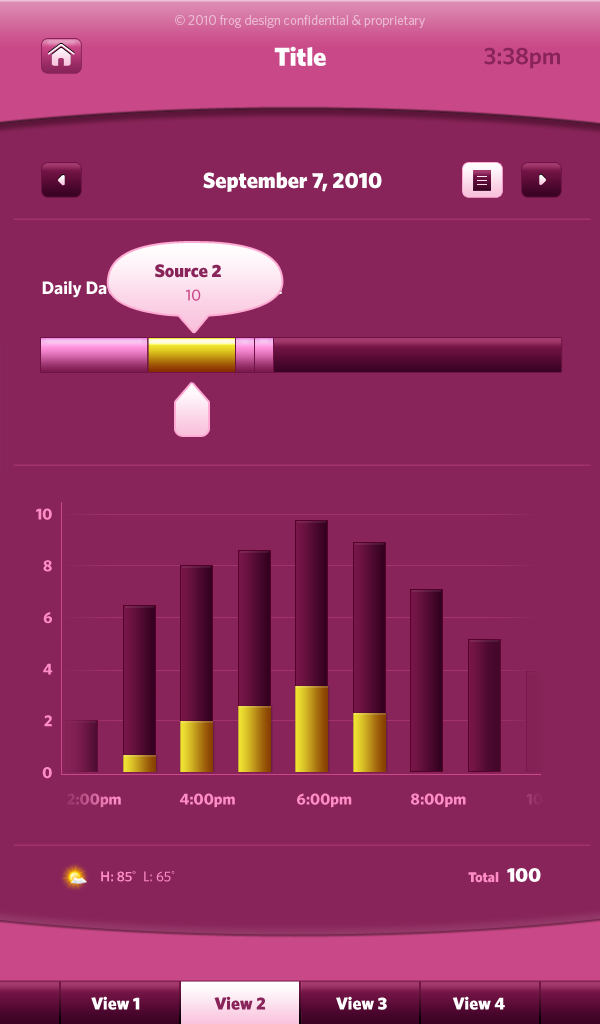
<style>
.page{position:relative;width:600px;height:1024px;background:#882459}
.page>*{position:absolute;margin:0}
.t1{font:13.3px "Whitney-Book";color:#eab7d0}
.t2{font:26px "Whitney-Black";color:#f0f0f0}
.t3{font:24px "Whitney-Semibold";color:#882459}
.t4{font:22px "Whitney-Black";color:#f0f0f0}
.t5{font:18px "Whitney-Black";color:#882459}
.t6{font:18px "Whitney-Bold";color:#f0f0f0}
.t7{font:16px "Whitney-Medium";color:#c94887}
.t8{font:16px/51.7px "Whitney-Bold";color:#ff8dc5}
.t9{font:16px "Whitney-Bold"}
.t10{font:16px "Whitney-Bold";color:#ff8dc5}
.t11{font:16px "Whitney-Bold";color:#882459}
.t12{font:20px "Whitney-Black";color:#f0f0f0}
.t13{font:14px "Whitney-Semibold";color:#ff8dc5}
.t14{font:14px "Whitney-Medium";color:#ff8dc5}
.t15{font:14px "Whitney-Black";color:#ff8dc5}
.t16{font:17.5px "Whitney-Black";color:#ffffff}
.t17{font:17.5px "Whitney-Black";color:#882459}
</style>
<div class="page">
<p class="t1" style="left:175px;top:15px;width:250px;height:13px">© 2010 frog design confidential &amp; proprietary</p>
<p class="t2" style="left:274px;top:46px;width:52px;height:20px">Title</p>
<p class="t3" style="left:484px;top:47px;width:76px;height:22px">3:38pm</p>
<p class="t4" style="left:203px;top:172px;width:179px;height:20px">September 7, 2010</p>
<p class="t5" style="left:155px;top:264px;width:66px;height:14px">Source 2</p>
<p class="t6" style="left:42px;top:281px;width:240px;height:17px">Daily Data by Individual Source</p>
<p class="t7" style="left:185px;top:289px;width:16px;height:12px">10</p>
<p class="t8" style="left:36px;top:508px;width:17px;height:271px;text-align:right">10<br>8<br>6<br>4<br>2<br>0</p>
<p class="t9" style="left:67px;top:793px;width:54px;height:15px">2:00pm</p>
<p class="t10" style="left:180px;top:793px;width:55px;height:15px">4:00pm</p>
<p class="t10" style="left:297px;top:793px;width:55px;height:15px">6:00pm</p>
<p class="t10" style="left:411px;top:793px;width:55px;height:15px">8:00pm</p>
<p class="t11" style="left:526px;top:793px;width:50px;height:15px">10:00pm</p>
<p class="t12" style="left:507px;top:868px;width:34px;height:14px">100</p>
<p class="t13" style="left:101px;top:871px;width:74px;height:11px">H: 85°    <span class="t14">L: 65°</span></p>
<p class="t15" style="left:468px;top:871px;width:31px;height:12px">Total</p>
<p class="t16" style="left:91px;top:996px;width:49px;height:14px">View 1</p>
<p class="t17" style="left:214px;top:996px;width:52px;height:14px">View 2</p>
<p class="t16" style="left:336px;top:996px;width:51px;height:14px">View 3</p>
<p class="t16" style="left:452px;top:996px;width:53px;height:14px">View 4</p>
</div>
